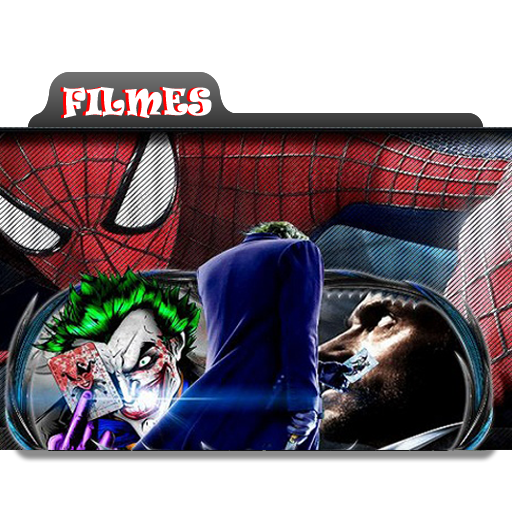
<style>
.page{position:relative;width:512px;height:512px;background:#ffffff}
.page>*{position:absolute;margin:0}
.t1{font:34.2px "Ravie";font-weight:bold;scale:0.84 1}
.t2{font:34.2px "Ravie";color:#ffffff;font-weight:bold;scale:0.84 1}
</style>
<div class="page">
<p class="t1" style="left:60px;top:87px;width:149px;height:31px">FILMES</p>
<p class="t2" style="left:63px;top:87px;width:149px;height:31px">FILMES</p>
</div>
